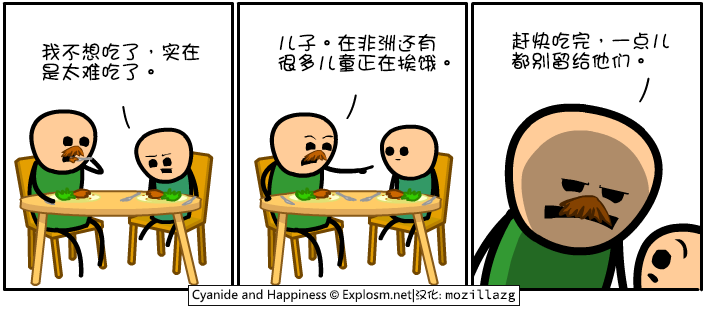
<style>
.page{position:relative;width:708px;height:310px;background:#ffffff}
.page>*{position:absolute;margin:0}
.t1{font:20px/20px "DFGirl";color:#000000}
</style>
<div class="page">
<p class="t1" style="left:278px;top:33px;width:172px;height:39px">儿子。在非洲还有<br>很多儿童正在挨饿。</p>
<p class="t1" style="left:511px;top:31px;width:159px;height:39px">赶快吃完，一点儿<br>都别留给他们。</p>
<p class="t1" style="left:41px;top:42px;width:159px;height:39px">我不想吃了，实在<br>是太难吃了。</p>
</div>
